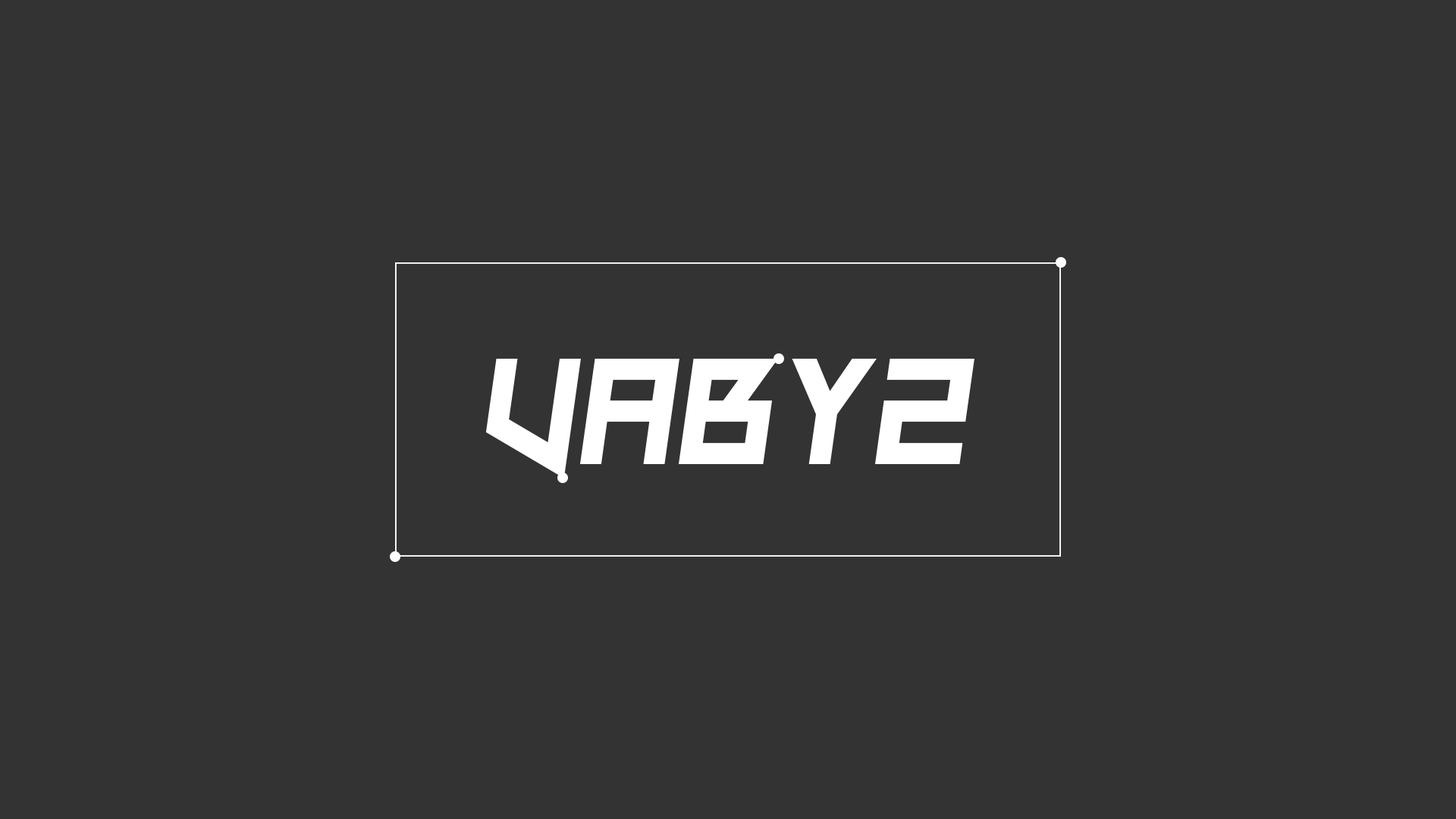
<style>
.page{position:relative;width:1456px;height:819px;background:#333333}
.page>*{position:absolute;margin:0}
.t1{font:144.1px "SlopeOpera";color:#ffffff}
</style>
<div class="page">
<p class="t1" style="left:485px;top:359px;width:489px;height:120px">VABYZ</p>
</div>
